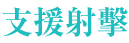
<style>
.page{position:relative;width:129px;height:43px;background:#ffffff}
.page>*{position:absolute;margin:0}
.t1{font:32px "RyuminPro-ExBold";color:#1dbdc0}
</style>
<div class="page">
<p class="t1" style="left:2px;top:6px;width:126px;height:31px">支援射擊</p>
</div>
